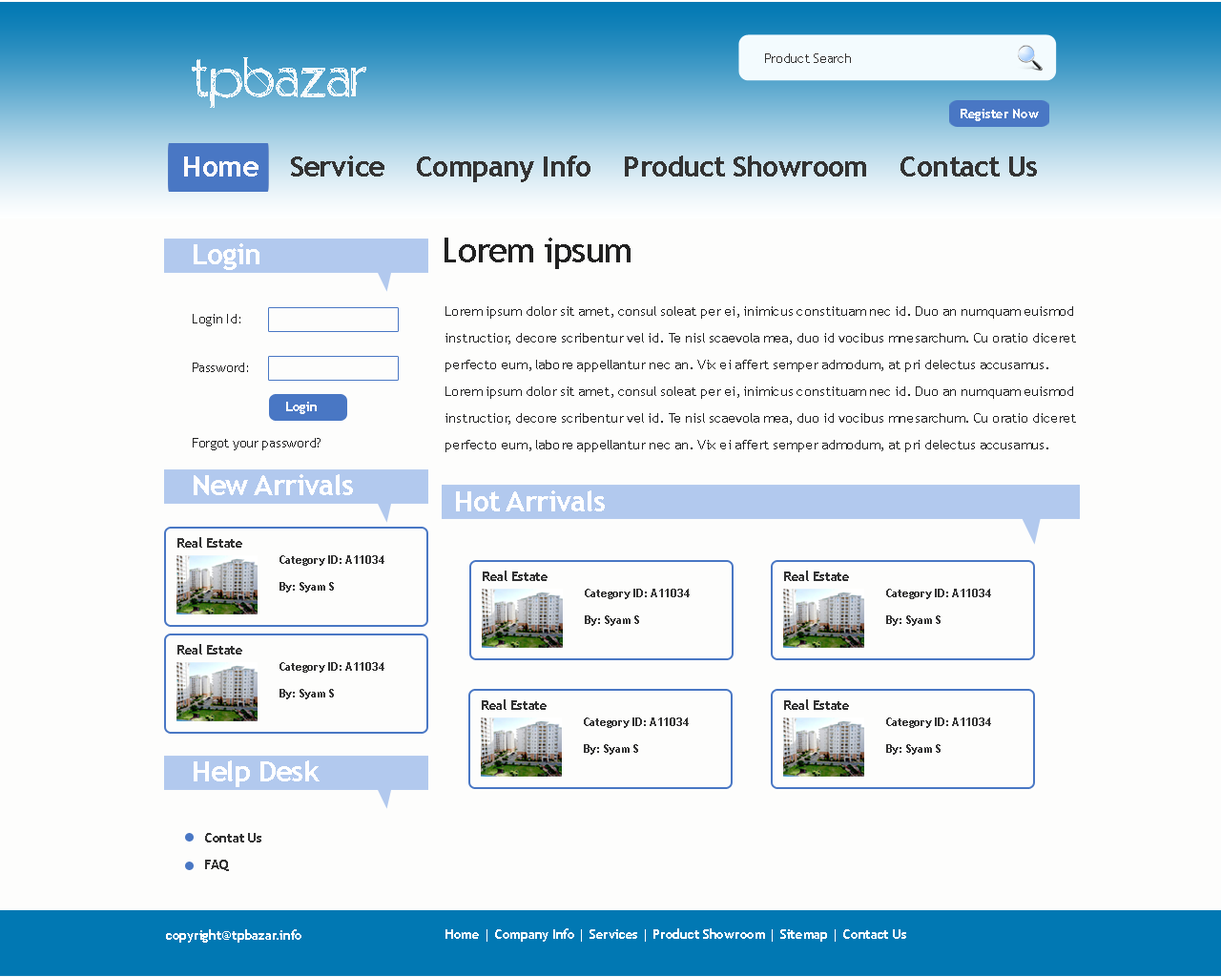
<style>
.page{position:relative;width:1221px;height:977px;background:#fdfdfc}
.page>*{position:absolute;margin:0}
.t1{font:13.4px "TrebuchetMS";letter-spacing:-0.02em;color:#333333}
.t2{font:68.7px "Positiv-A";letter-spacing:-0.02em;color:#f7f9fa}
.t3{font:13.4px "TrebuchetMS-Bold";letter-spacing:-0.02em;color:#ffffff}
.t4{font:28.6px "TrebuchetMS-Bold";letter-spacing:-0.02em;color:#333333}
.t5{font:28.6px "TrebuchetMS-Bold";letter-spacing:-0.02em;color:#fdfafc}
.t6{font:28.6px "TrebuchetMS-Bold";letter-spacing:-0.02em;color:#ffffff}
.t7{font:34.3px "TrebuchetMS";letter-spacing:-0.02em;color:#212121}
.t8{font:13.4px "TrebuchetMS";letter-spacing:-0.02em;color:#212121}
.t9{font:13.4px/26.7px "TrebuchetMS";letter-spacing:-0.02em;color:#212121;scale:1.05 1}
.t10{font:13.4px "TrebuchetMS-Bold";letter-spacing:-0.02em;color:#fefdfd}
.t11{font:13.4px "TrebuchetMS-Bold";letter-spacing:-0.02em;color:#333333}
.t12{font:11.4px/26.7px "TrebuchetMS-Bold";letter-spacing:-0.02em;color:#333333}
.t13{font:13.4px/26.7px "TrebuchetMS-Bold";letter-spacing:-0.02em;color:#333333}
</style>
<div class="page">
<p class="t1" style="left:765px;top:53px;width:86px;height:10px">Product Search</p>
<p class="t2" style="left:192px;top:57px;width:174px;height:51px">tpbazar</p>
<p class="t3" style="left:960px;top:109px;width:79px;height:12px">Register Now</p>
<p class="t4" style="left:184px;top:155px;width:853px;height:27px"><span class="t5">Home </span>   Service    Company Info    Product Showroom    Contact Us</p>
<p class="t6" style="left:194px;top:243px;width:65px;height:27px">Login</p>
<p class="t7" style="left:444px;top:237px;width:186px;height:32px">Lorem ipsum</p>
<p class="t8" style="left:193px;top:314px;width:47px;height:12px">Login Id:</p>
<p class="t9" style="left:445px;top:306px;width:631px;height:146px">Lorem ipsum dolor sit amet, consul soleat per ei, inimicus constituam nec id. Duo an numquam euismod instructior, decore scribentur vel id. Te nisl scaevola mea, duo id vocibus mnesarchum. Cu oratio diceret perfecto eum, labore appellantur nec an. Vix ei affert semper admodum, at pri delectus accusamus. Lorem ipsum dolor sit amet, consul soleat per ei, inimicus constituam nec id. Duo an numquam euismod instructior, decore scribentur vel id. Te nisl scaevola mea, duo id vocibus mnesarchum. Cu oratio diceret perfecto eum, labore appellantur nec an. Vix ei affert semper admodum, at pri delectus accusamus.</p>
<p class="t8" style="left:193px;top:362px;width:55px;height:10px">Password:</p>
<p class="t10" style="left:286px;top:402px;width:31px;height:12px">Login</p>
<p class="t8" style="left:193px;top:438px;width:127px;height:12px">Forgot your password?</p>
<p class="t6" style="left:194px;top:474px;width:159px;height:21px">New Arrivals</p>
<p class="t6" style="left:456px;top:490px;width:149px;height:21px">Hot Arrivals</p>
<p class="t11" style="left:177px;top:537px;width:65px;height:10px">Real Estate</p>
<p class="t12" style="left:279px;top:555px;width:105px;height:37px">Category ID: A11034<br>By: Syam S</p>
<p class="t11" style="left:483px;top:570px;width:64px;height:11px">Real Estate</p>
<p class="t11" style="left:784px;top:570px;width:65px;height:11px">Real Estate</p>
<p class="t12" style="left:585px;top:589px;width:105px;height:37px">Category ID: A11034<br>By: Syam S</p>
<p class="t12" style="left:886px;top:589px;width:105px;height:37px">Category ID: A11034<br>By: Syam S</p>
<p class="t11" style="left:177px;top:644px;width:65px;height:10px">Real Estate</p>
<p class="t12" style="left:279px;top:662px;width:105px;height:37px">Category ID: A11034<br>By: Syam S</p>
<p class="t11" style="left:482px;top:699px;width:65px;height:11px">Real Estate</p>
<p class="t11" style="left:784px;top:699px;width:65px;height:11px">Real Estate</p>
<p class="t12" style="left:584px;top:717px;width:105px;height:37px">Category ID: A11034<br>By: Syam S</p>
<p class="t12" style="left:886px;top:717px;width:105px;height:37px">Category ID: A11034<br>By: Syam S</p>
<p class="t6" style="left:194px;top:760px;width:126px;height:27px">Help Desk</p>
<p class="t13" style="left:205px;top:833px;width:56px;height:38px">Contat Us<br>FAQ</p>
<p class="t3" style="left:166px;top:929px;width:135px;height:13px">copyright@tpbazar.info</p>
<p class="t3" style="left:445px;top:928px;width:461px;height:13px">Home | Company Info | Services | Product Showroom | Sitemap | Contact Us</p>
</div>
